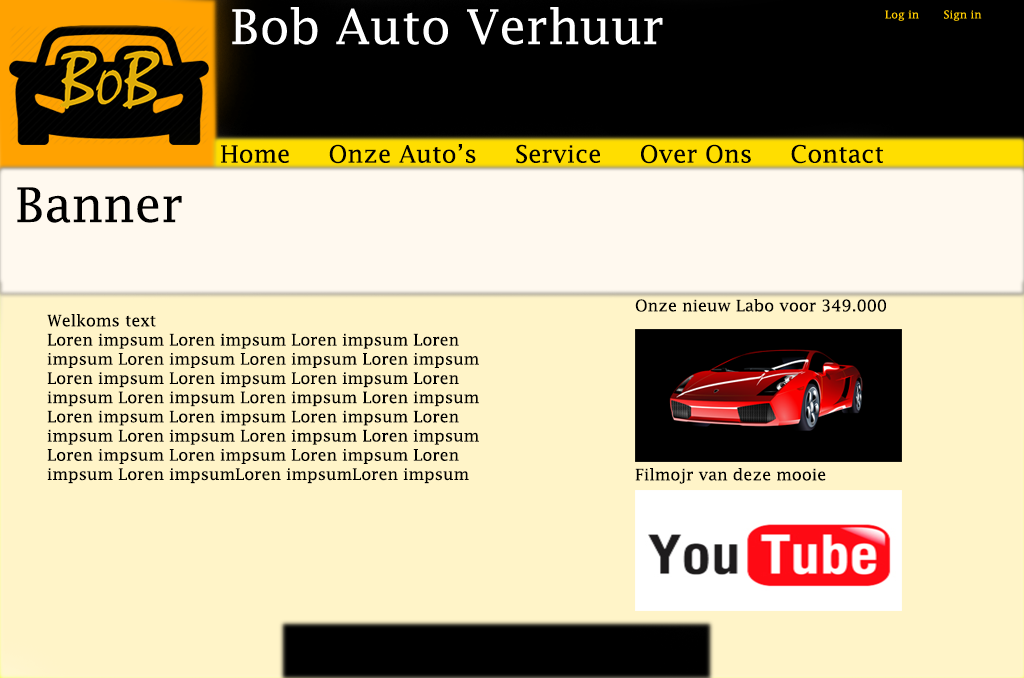
<style>
.page{position:relative;width:1024px;height:678px;background:#fff4c8}
.page>*{position:absolute;margin:0}
.t1{font:24px "LucidaFax";color:#000000}
.t2{font:48px "LucidaFax";color:#000000}
.t3{font:16px "LucidaFax";color:#000000}
</style>
<div class="page">
<p class="t1" style="left:221px;top:144px;width:662px;height:20px">Home     Onze Auto’s     Service     Over Ons     Contact</p>
<p class="t2" style="left:17px;top:187px;width:165px;height:36px">Banner</p>
<p class="t3" style="left:635px;top:299px;width:251px;height:13px">Onze nieuw Labo voor 349.000</p>
<p class="t3" style="left:47px;top:314px;width:432px;height:170px">Welkoms text<br>Loren impsum Loren impsum Loren impsum Loren impsum Loren impsum Loren impsum Loren impsum Loren impsum Loren impsum Loren impsum Loren impsum Loren impsum Loren impsum Loren impsum Loren impsum Loren impsum Loren impsum Loren impsum Loren impsum Loren impsum Loren impsum Loren impsum Loren impsum Loren impsum Loren impsum Loren impsumLoren impsumLoren impsum</p>
<p class="t3" style="left:635px;top:468px;width:191px;height:16px">Filmojr van deze mooie</p>
</div>
